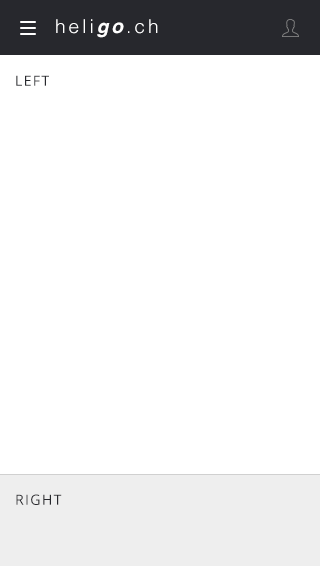
<style>
.page{position:relative;width:320px;height:566px;background:#ffffff}
.page>*{position:absolute;margin:0}
.t1{font:19px "Helvetica-Light";letter-spacing:0.16em;color:#ffffff}
.t2{font:19px "Helvetica-BoldOblique";letter-spacing:0.16em;color:#ffffff}
.t3{font:14px "OpenSans";letter-spacing:0.1em;color:#27282d;text-transform:uppercase}
</style>
<div class="page">
<p class="t1" style="left:56px;top:19px;width:102px;height:19px">heli<span class="t2">go</span>.ch</p>
<p class="t3" style="left:16px;top:75px;width:33px;height:11px">lefT</p>
<p class="t3" style="left:16px;top:494px;width:46px;height:11px">RIGHT</p>
</div>
